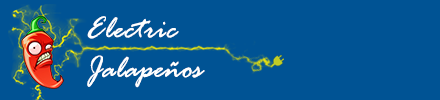
<style>
.page{position:relative;width:440px;height:100px;background:#005394}
.page>*{position:absolute;margin:0}
.t1{font:33px "RageItalic";color:#ffffff}
</style>
<div class="page">
<p class="t1" style="left:87px;top:16px;width:118px;height:72px">Electric <br>Jalapeños</p>
</div>
